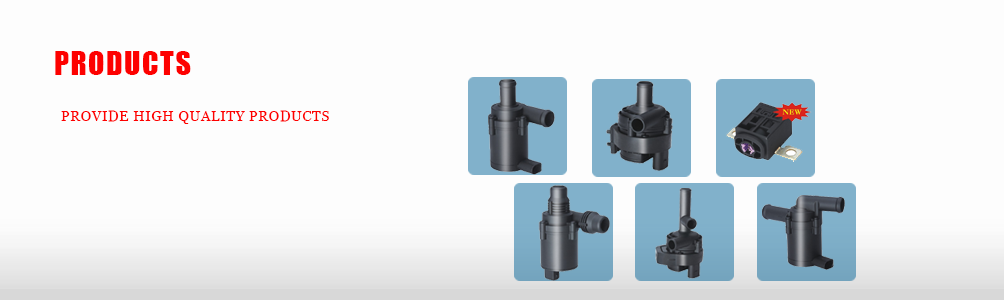
<style>
.page{position:relative;width:1004px;height:300px;background:#fdfdfd}
.page>*{position:absolute;margin:0}
.t1{font:30px "Impact";letter-spacing:0.05em;color:#fd0100}
.t2{font:14px "Georgia";letter-spacing:0.05em;color:#fd0100}
</style>
<div class="page">
<p class="t1" style="left:55px;top:51px;width:136px;height:24px">PRODUCTS</p>
<p class="t2" style="left:61px;top:110px;width:268px;height:14px">PROVIDE HIGH QUALITY PRODUCTS</p>
</div>
